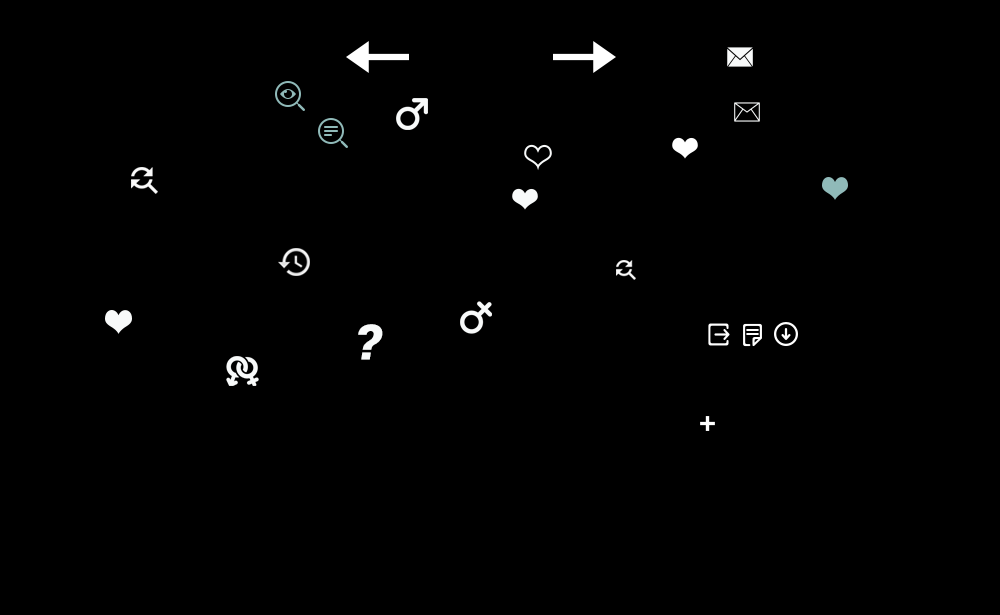
<style>
.page{position:relative;width:1000px;height:615px;background:#000000}
.page>*{position:absolute;margin:0}
.t1{font:48px "Roboto-BlackItalic";letter-spacing:0.1em;color:#f8fafa;font-weight:bold}
</style>
<div class="page">
<p class="t1" style="left:358px;top:324px;width:25px;height:36px">?</p>
</div>
